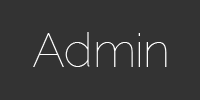
<style>
.page{position:relative;width:200px;height:100px;background:#333333}
.page>*{position:absolute;margin:0}
.t1{font:48px "Raleway-Thin";color:#ffffff}
</style>
<div class="page">
<p class="t1" style="left:33px;top:32px;width:134px;height:35px">Admin</p>
</div>
